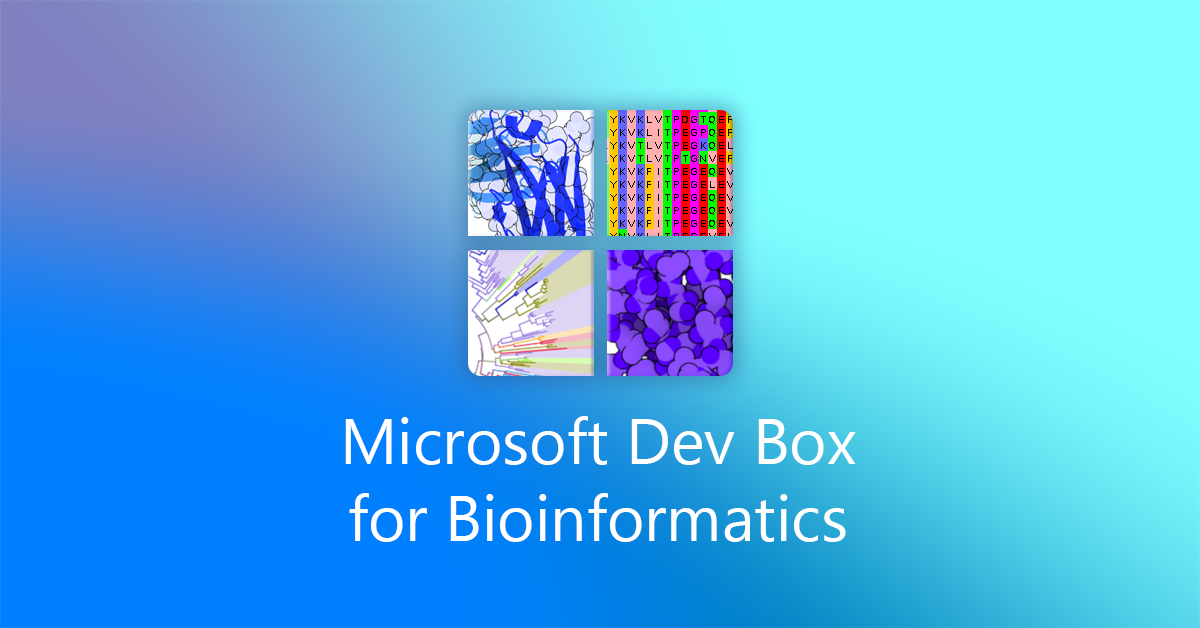
<style>
.page{position:relative;width:1200px;height:628px}
.page>*{position:absolute;margin:0}
.t1{font:64px "SegoeUI";color:#ffffff}
</style>
<div class="page">
<p class="t1" style="left:345px;top:416px;width:511px;height:126px;text-align:center">Microsoft Dev Box<br>for Bioinformatics</p>
</div>
